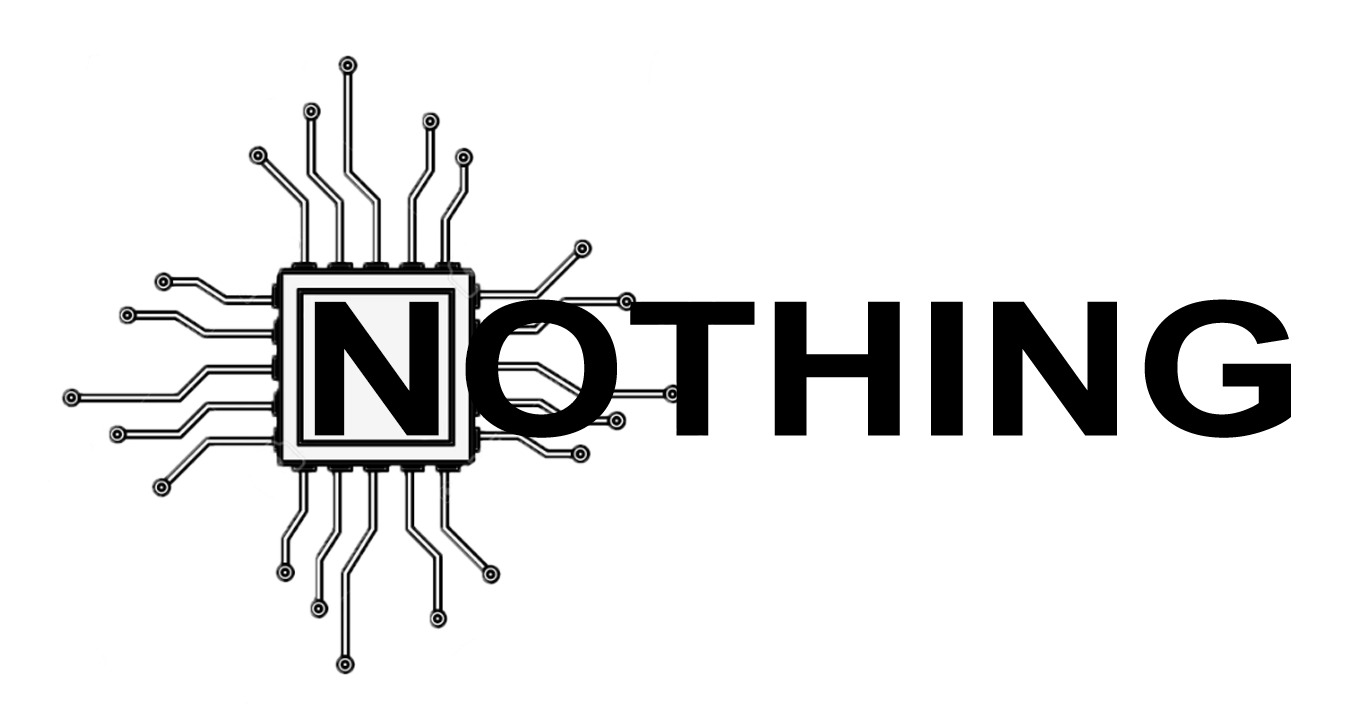
<style>
.page{position:relative;width:1360px;height:728px;background:#ffffff}
.page>*{position:absolute;margin:0}
.t1{font:186.3px "Arial-BoldMT";color:#000000;scale:1.17 1}
</style>
<div class="page">
<p class="t1" style="left:314px;top:299px;width:977px;height:139px">NOTHING</p>
</div>
